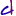
<style>
.page{position:relative;width:16px;height:16px;background:#ffffff}
.page>*{position:absolute;margin:0}
.t1{font:18.9px "Architect2";letter-spacing:-0.12em;color:#1e00a3}
.t2{font:18.9px "Architect2";letter-spacing:-0.12em;color:#7e005d}
</style>
<div class="page">
<p class="t1" style="left:0px;top:0px;width:14px;height:15px">c<span class="t2">l</span></p>
</div>
